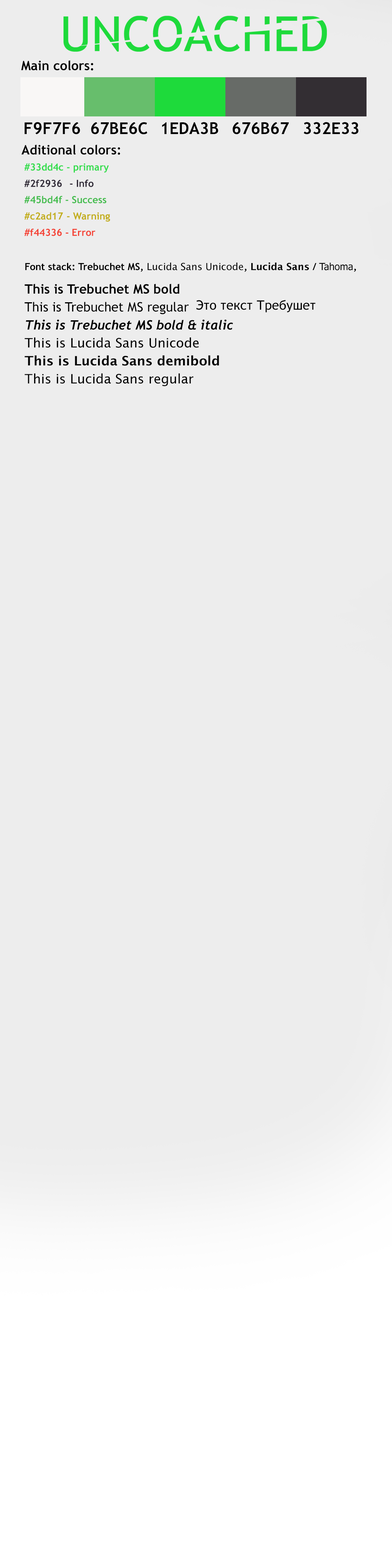
<style>
.page{position:relative;width:392px;height:1568px;background:#ededed}
.page>*{position:absolute;margin:0}
.t1{font:13.1px "TrebuchetMS-Bold";color:#000000}
.t2{font:16.3px "TrebuchetMS-Bold";color:#000000}
.t3{font:9.8px/16.3px "TrebuchetMS-Bold";color:#33dd4c}
.t4{font:9.8px/16.3px "TrebuchetMS-Bold";color:#2f2936}
.t5{font:9.8px/16.3px "TrebuchetMS-Bold";color:#45bd4f}
.t6{font:9.8px/16.3px "TrebuchetMS-Bold";color:#c2ad17}
.t7{font:9.8px/16.3px "TrebuchetMS-Bold";color:#f44336}
.t8{font:9.8px "TrebuchetMS-Bold";color:#000000}
.t9{font:9.8px "LucidaSansUnicode";color:#000000}
.t10{font:9.8px "LucidaSans-Demi";color:#000000}
.t11{font:9.8px "Tahoma";color:#000000}
.t12{font:13.1px/18px "Trebuchet-BoldItalic";color:#000000}
.t13{font:13.1px/18px "TrebuchetMS-Bold";color:#000000}
.t14{font:13.1px/18px "TrebuchetMS";color:#000000}
.t15{font:13.1px/18px "LucidaSansUnicode";color:#000000}
.t16{font:13.1px/18px "LucidaSans-Demi";color:#000000}
.t17{font:13.1px/18px "LucidaSans";color:#000000}
.t18{font:13.1px "TrebuchetMS";color:#000000}
</style>
<div class="page">
<p class="t1" style="left:21px;top:60px;width:72px;height:11px">Main colors:</p>
<p class="t2" style="left:24px;top:122px;width:56px;height:12px">F9F7F6</p>
<p class="t2" style="left:91px;top:122px;width:56px;height:12px">67BE6C</p>
<p class="t2" style="left:162px;top:122px;width:56px;height:12px">1EDA3B</p>
<p class="t2" style="left:232px;top:122px;width:57px;height:12px">676B67</p>
<p class="t2" style="left:303px;top:122px;width:56px;height:12px">332E33</p>
<p class="t1" style="left:21px;top:145px;width:99px;height:10px">Aditional colors:</p>
<p class="t3" style="left:24px;top:163px;width:86px;height:73px">#33dd4c - primary<br><span class="t4">#2f2936  - Info<br></span><span class="t5">#45bd4f - Success<br></span><span class="t6">#c2ad17 - Warning<br></span><span class="t7">#f44336 - Error</span></p>
<p class="t8" style="left:25px;top:262px;width:331px;height:10px">Font stack: Trebuchet MS,<span class="t9"> Lucida Sans Unicode</span>, <span class="t10">Lucida Sans</span> / <span class="t11">Tahoma</span>,</p>
<p class="t12" style="left:24px;top:284px;width:209px;height:102px"><span class="t13">This is Trebuchet MS bold<br></span><span class="t14">This is Trebuchet MS regular<br></span>This is Trebuchet MS bold &amp; italic <br><span class="t15">This is Lucida Sans Unicode<br></span><span class="t16">This is Lucida Sans demibold<br></span><span class="t17">This is Lucida Sans regular</span></p>
<p class="t18" style="left:196px;top:300px;width:120px;height:12px">Это текст Требушет</p>
</div>
